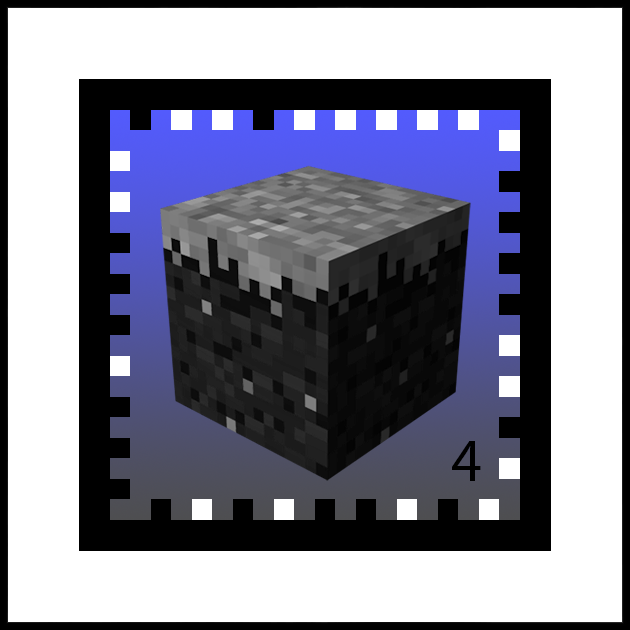
<style>
.page{position:relative;width:630px;height:630px;background:#ffffff}
.page>*{position:absolute;margin:0}
.t1{font:61.1px "MyriadPro-Regular";color:#000000;font-variant:small-caps}
</style>
<div class="page">
<p class="t1" style="left:452px;top:441px;width:29px;height:40px">4</p>
</div>
